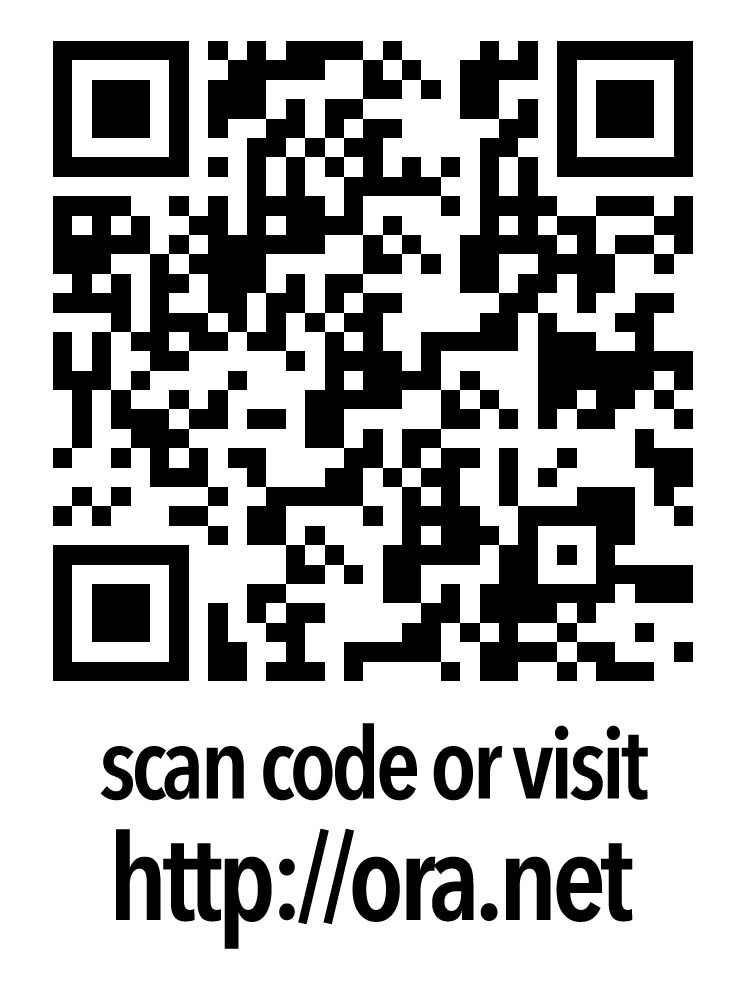
<style>
.page{position:relative;width:750px;height:998px;background:#ffffff}
.page>*{position:absolute;margin:0}
.t1{font:99.8px "AvenirNextCondensed-DemiBold";letter-spacing:-0.05em;color:#000000}
.t2{font:119.8px "AvenirNextCondensed-DemiBold";letter-spacing:-0.05em;color:#000000}
</style>
<div class="page">
<p class="t1" style="left:100px;top:723px;width:548px;height:78px">scan code or visit</p>
<p class="t2" style="left:116px;top:828px;width:517px;height:121px">http://ora.net</p>
</div>
